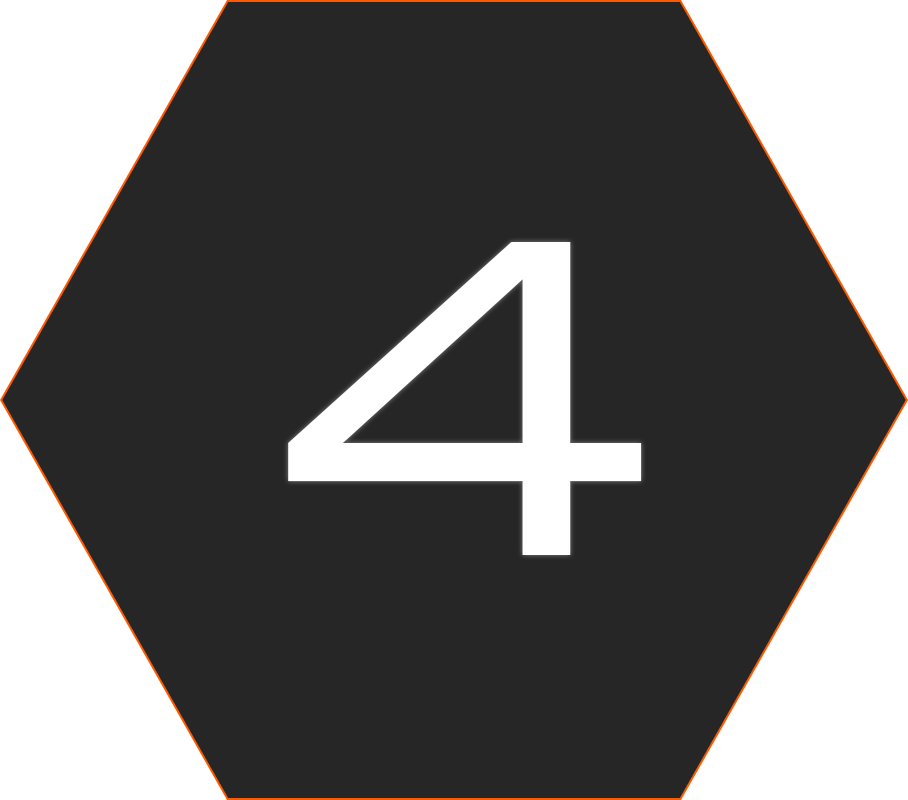
<style>
.page{position:relative;width:908px;height:800px;background:#262626}
.page>*{position:absolute;margin:0}
.t1{font:600px "BankGothicBT-Light";color:#ffffff}
</style>
<div class="page">
<p class="t1" style="left:288px;top:242px;width:354px;height:313px">4</p>
</div>
